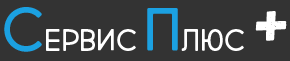
<style>
.page{position:relative;width:290px;height:61px;background:#333333}
.page>*{position:absolute;margin:0}
.t1{font:30px "MarketFresh";color:#ffffff}
.t2{font:60px "MarketFresh";color:#1ba1e2}
.t3{font:72px "Gagalin-Regular";color:#ffffff}
</style>
<div class="page">
<p class="t1" style="left:4px;top:7px;width:283px;height:45px"><span class="t2">C</span>ервис <span class="t2">П</span>люс <span class="t3">+</span></p>
</div>
